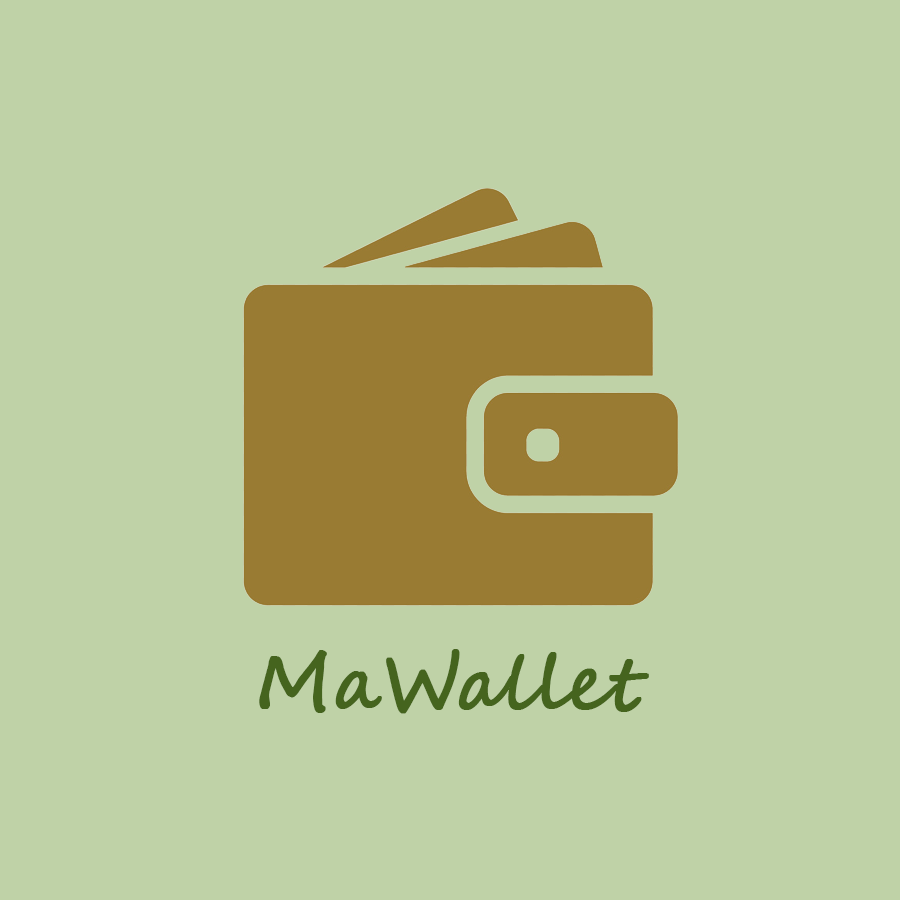
<style>
.page{position:relative;width:900px;height:900px;background:#bfd2a7}
.page>*{position:absolute;margin:0}
.t1{font:74.9px "SegoeScript";letter-spacing:0.01em;color:#45641e;font-weight:bold}
</style>
<div class="page">
<p class="t1" style="left:259px;top:649px;width:390px;height:65px">MaWallet</p>
</div>
